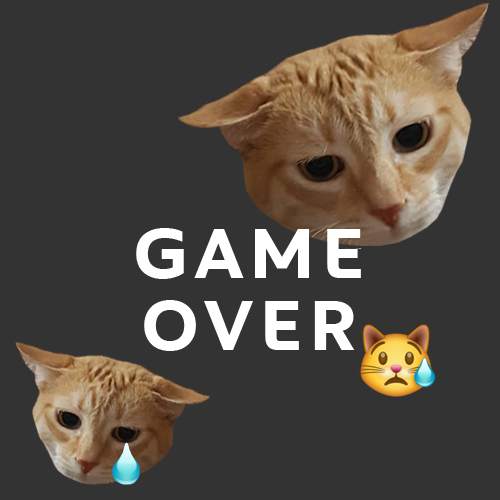
<style>
.page{position:relative;width:500px;height:500px;background:#333333}
.page>*{position:absolute;margin:0}
.t1{font:72px/72px "Peugeot-Bold";letter-spacing:0.075em;color:#ffffff;text-transform:uppercase}
</style>
<div class="page">
<p class="t1" style="left:136px;top:228px;width:225px;height:123px;text-align:center">Game<br>over</p>
</div>
